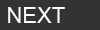
<style>
.page{position:relative;width:100px;height:30px;background:#333333}
.page>*{position:absolute;margin:0}
.t1{font:22px "ArialMT";color:#ffffff}
</style>
<div class="page">
<p class="t1" style="left:8px;top:7px;width:57px;height:16px">NEXT</p>
</div>
